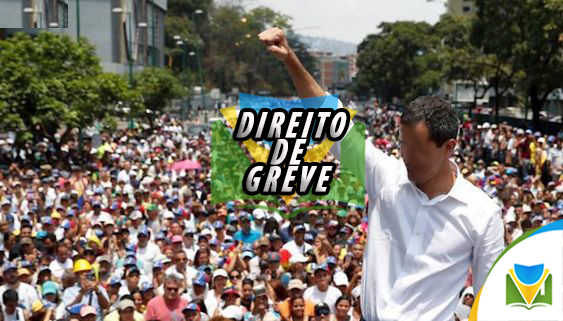
<style>
.page{position:relative;width:563px;height:321px}
.page>*{position:absolute;margin:0}
.t1{font:36.7px/27px "MyriadPro-BoldCondIt";letter-spacing:0.1em;color:#fdf8f8;text-transform:uppercase;font-weight:bold;font-style:italic;scale:0.82 1}
</style>
<div class="page">
<p class="t1" style="left:236px;top:112px;width:111px;height:80px;text-align:center">Direito <br>       de<br>    greve</p>
</div>
